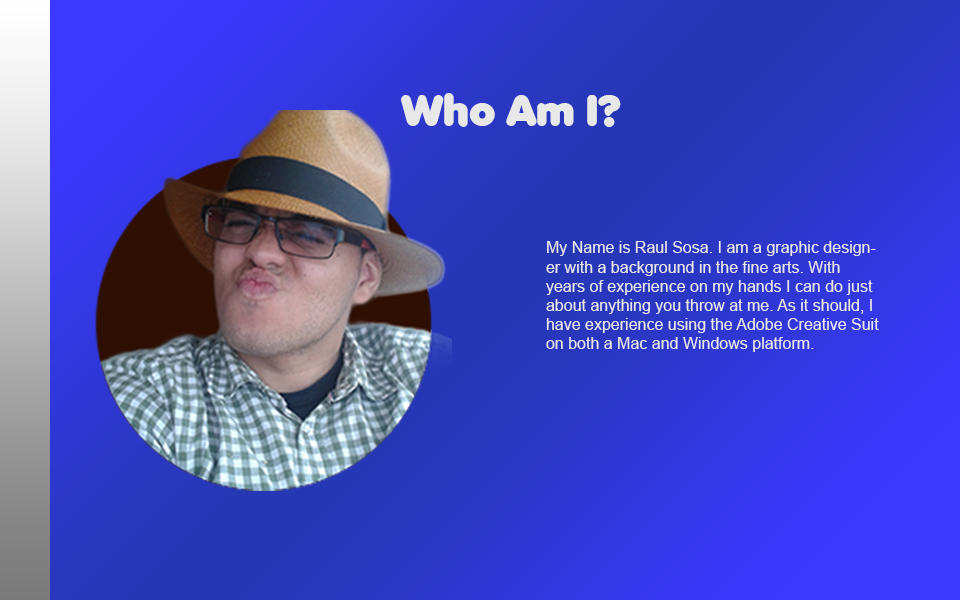
<style>
.page{position:relative;width:960px;height:600px}
.page>*{position:absolute;margin:0}
.t1{font:41.7px "AnjaElianeaccent-Nornal";color:#e8e8e8}
.t2{font:16px "ArialMT";color:#e8e8e8}
</style>
<div class="page">
<p class="t1" style="left:401px;top:93px;width:220px;height:34px">Who Am I?</p>
<p class="t2" style="left:546px;top:241px;width:333px;height:111px">My Name is Raul Sosa. I am a graphic designer with a background in the fine arts. With years of experience on my hands I can do just about anything you throw at me. As it should, I have experience using the Adobe Creative Suit on both a Mac and Windows platform.</p>
</div>
